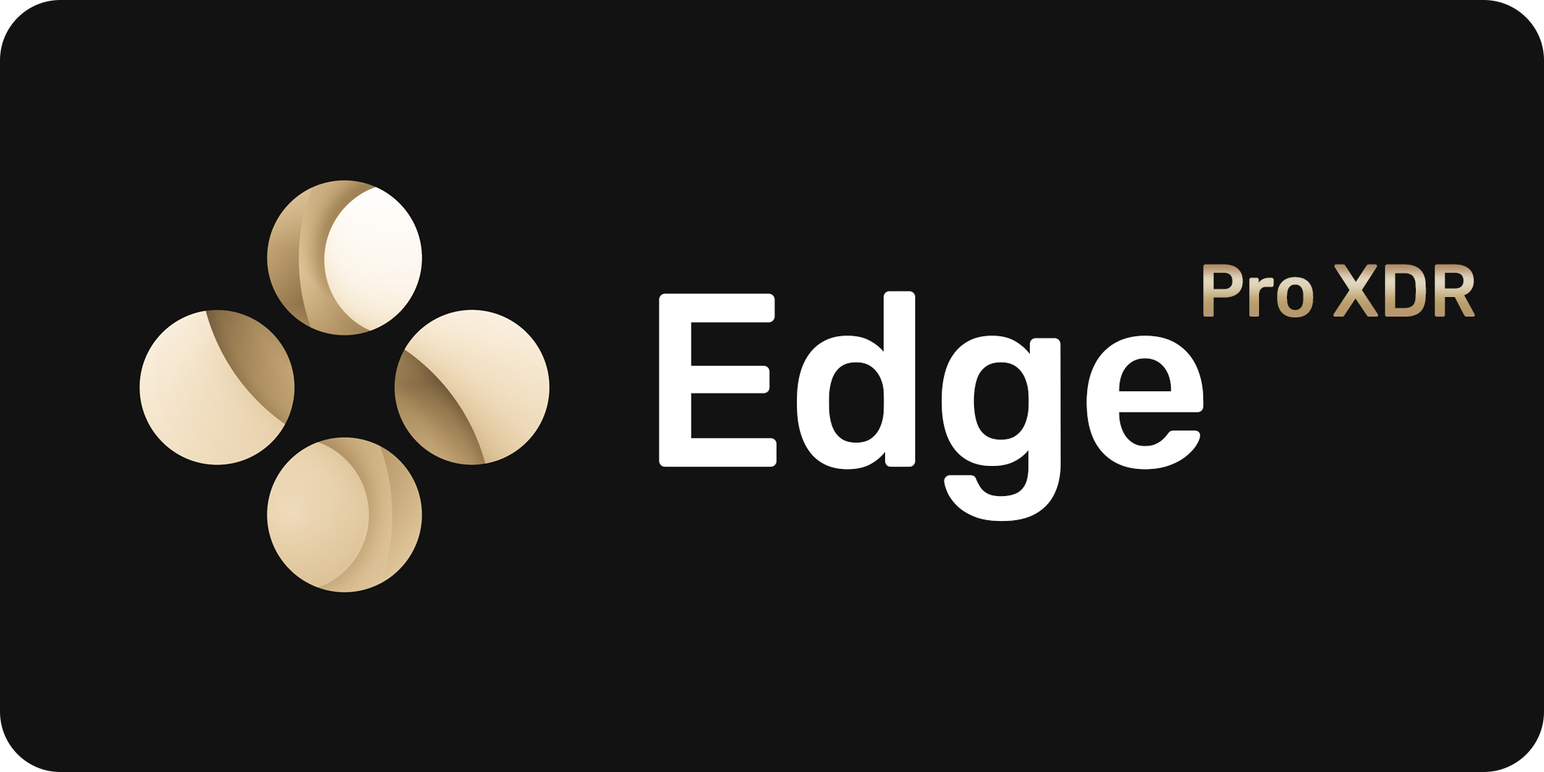
<style>
.page{position:relative;width:1544px;height:772px;background:#121212}
.page>*{position:absolute;margin:0}
.t1{font:74.5px "RubikRoman-Medium";scale:0.96 1}
.t2{font:247px "RubikRoman-Medium";color:#ffffff;scale:0.96 1}
</style>
<div class="page">
<p class="t1" style="left:1203px;top:264px;width:273px;height:53px">Pro XDR</p>
<p class="t2" style="left:659px;top:291px;width:545px;height:231px">Edge</p>
</div>
